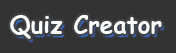
<style>
.page{position:relative;width:176px;height:53px;background:#333333}
.page>*{position:absolute;margin:0}
.t1{font:24px "ComicSansMS-Bold";color:#fafcfd}
</style>
<div class="page">
<p class="t1" style="left:10px;top:15px;width:152px;height:24px">Quiz Creator</p>
</div>
